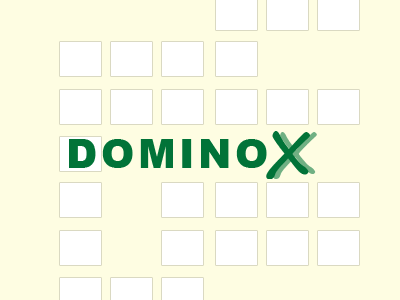
<style>
.page{position:relative;width:400px;height:300px;background:#fefde2}
.page>*{position:absolute;margin:0}
.t1{font:60px "SegoePrint-Bold";letter-spacing:0.09em;color:#017338}
.t2{font:40px "Arial-Black";letter-spacing:0.09em;color:#017338}
</style>
<div class="page">
<p class="t1" style="left:266px;top:131px;width:44px;height:48px">X</p>
<p class="t2" style="left:69px;top:139px;width:198px;height:29px">DOMINO</p>
</div>
